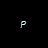
<style>
.page{position:relative;width:48px;height:48px;background:#000000}
.page>*{position:absolute;margin:0}
.t1{font:8.8px "AvantGardeLT-ExtraLightObl";color:#cdf8fd;text-transform:uppercase}
</style>
<div class="page">
<p class="t1" style="left:20px;top:21px;width:6px;height:7px">p</p>
</div>
